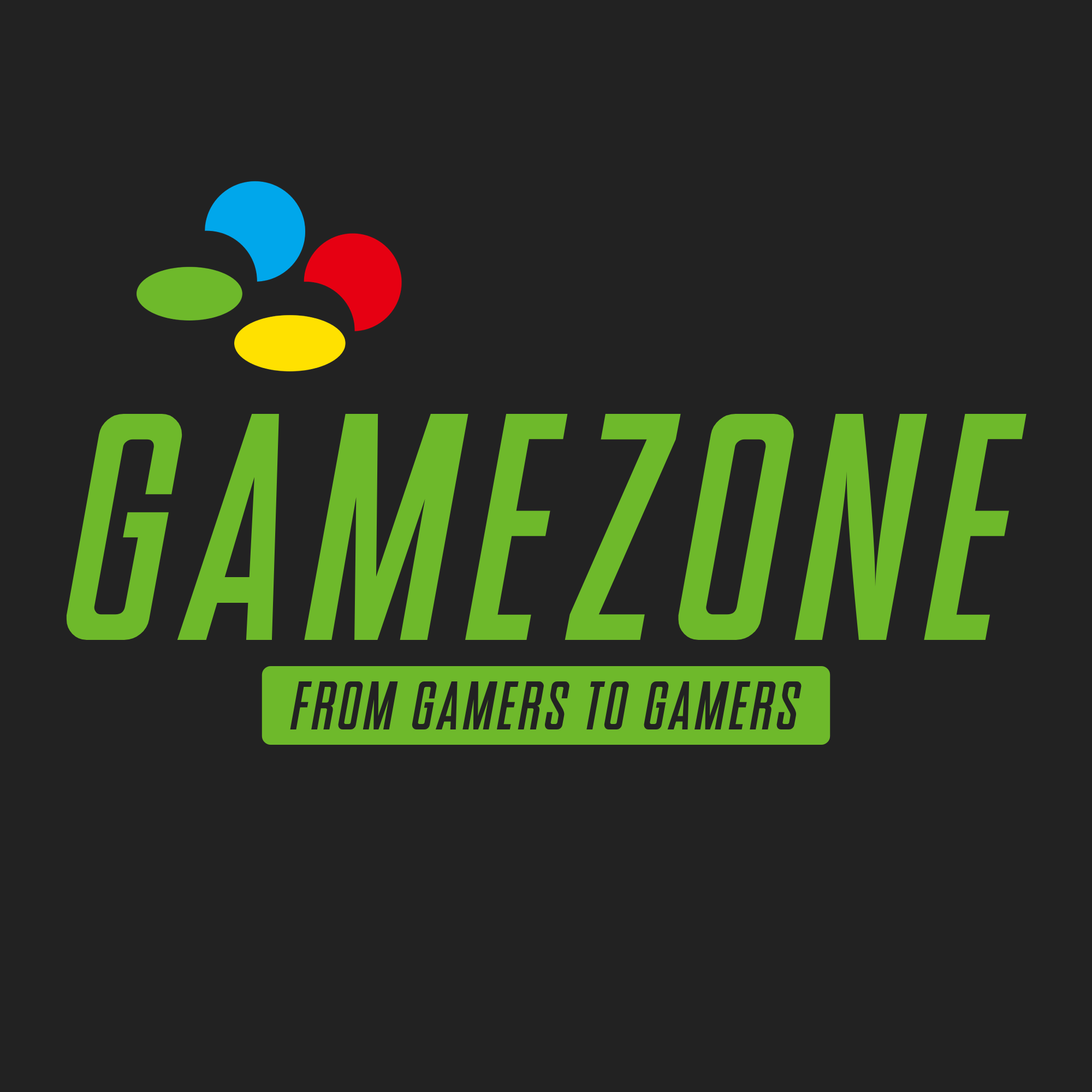
<style>
.page{position:relative;width:1092px;height:1092px;background:#222222}
.page>*{position:absolute;margin:0}
.t1{font:322.8px "SNES-Italic";letter-spacing:0.059em;color:#6eb92b}
.t2{font:68.6px "SNES-Italic";letter-spacing:0.059em;color:#222222}
</style>
<div class="page">
<p class="t1" style="left:66px;top:414px;width:960px;height:226px">GAMEZONE</p>
<p class="t2" style="left:290px;top:681px;width:512px;height:48px">FROM GAMERS TO GAMERS</p>
</div>
